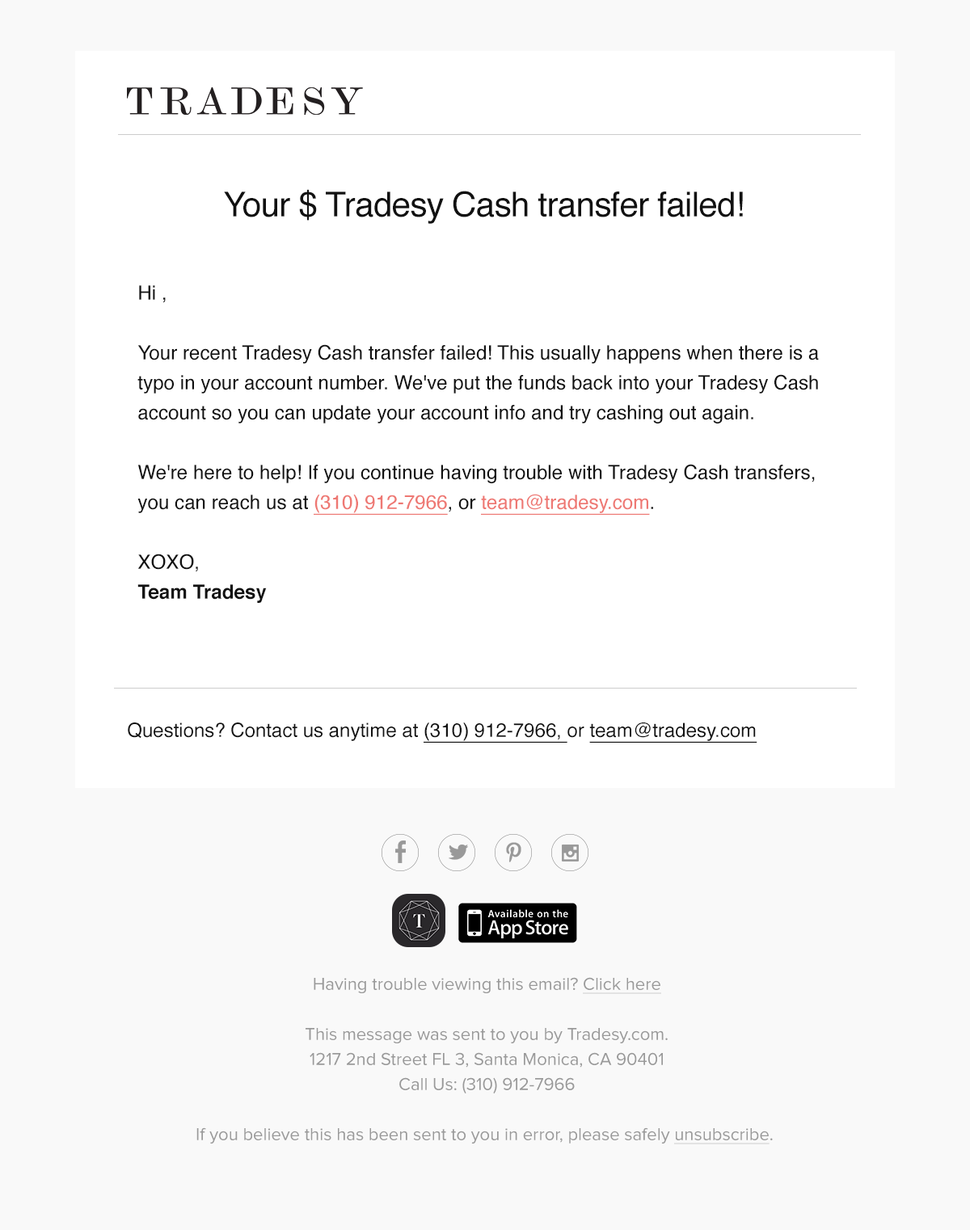
<style>
.page{position:relative;width:970px;height:1230px;background:#f9f9f9}
.page>*{position:absolute;margin:0}
.t1{font:34.3px "Helvetica";letter-spacing:-0.02em;color:#111111}
.t2{font:19.5px/29.9px "Helvetica";color:#111111}
.t3{font:19.5px/29.9px "Helvetica";color:#ee7873;text-decoration:underline}
.t4{font:19.5px/29.9px "Helvetica-Bold";color:#111111}
.t5{font:19.4px "Helvetica";color:#111111}
.t6{font:19.4px "Helvetica";color:#111111;text-decoration:underline}
.t7{font:17.8px/25px "ProximaNova-Regular";color:#999999}
.t8{font:17.8px/25px "ProximaNova-Regular";color:#999999;text-decoration:underline}
</style>
<div class="page">
<p class="t1" style="left:224px;top:189px;width:519px;height:35px">Your $ Tradesy Cash transfer failed!</p>
<p class="t2" style="left:137px;top:285px;width:682px;height:318px">Hi ,<br><br>Your recent Tradesy Cash transfer failed! This usually happens when there is a typo in your account number. We've put the funds back into your Tradesy Cash account so you can update your account info and try cashing out again.<br><br>We're here to help! If you continue having trouble with Tradesy Cash transfers, you can reach us at <span class="t3">(310) 912-7966</span>, or <span class="t3">team@tradesy.com</span>.<br><br>XOXO,<br><span class="t4">Team Tradesy</span></p>
<p class="t5" style="left:128px;top:722px;width:629px;height:21px">Questions? Contact us anytime at <span class="t6">(310) 912-7966, </span>or <span class="t6">team@tradesy.com</span></p>
<p class="t7" style="left:196px;top:977px;width:576px;height:167px;text-align:center">Having trouble viewing this email? <span class="t8">Click here<br></span><br>This message was sent to you by Tradesy.com.<br>1217 2nd Street FL 3, Santa Monica, CA 90401<br>Call Us: (310) 912-7966<br><br>If you believe this has been sent to you in error, please safely <span class="t8">unsubscribe</span>.</p>
</div>
